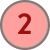
<style>
.page{position:relative;width:50px;height:50px;background:#ffa09e}
.page>*{position:absolute;margin:0}
.t1{font:30px "BrandonGrotesque-Bold";color:#9b110f}
</style>
<div class="page">
<p class="t1" style="left:18px;top:13px;width:13px;height:21px">2</p>
</div>
